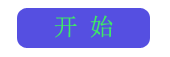
<style>
.page{position:relative;width:170px;height:57px;background:#554fe1}
.page>*{position:absolute;margin:0}
.t1{font:24px "SimSun";color:#3ee966}
</style>
<div class="page">
<p class="t1" style="left:54px;top:15px;width:59px;height:23px">开 始</p>
</div>
